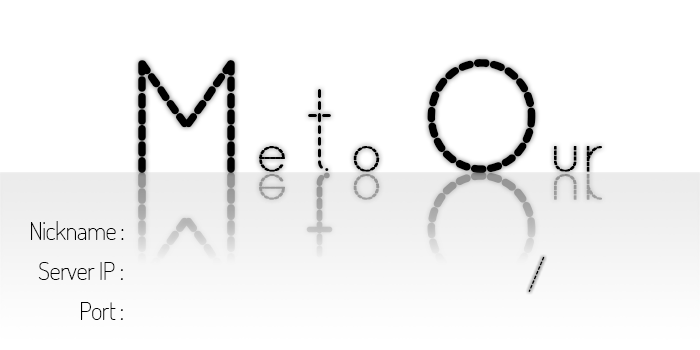
<style>
.page{position:relative;width:700px;height:350px;background:#ffffff}
.page>*{position:absolute;margin:0}
.t1{font:51.9px "QuicksandDash-Regular";letter-spacing:-0.025em;color:#000000;font-weight:bold}
.t2{font:155.6px "QuicksandDash-Regular";letter-spacing:-0.025em;color:#000000;font-weight:bold}
.t3{font:116.7px "QuicksandDash-Regular";letter-spacing:-0.025em;color:#000000;font-weight:bold}
.t4{font:51.9px "QuicksandDash-Regular";letter-spacing:-0.025em;font-weight:bold}
.t5{font:155.6px "QuicksandDash-Regular";letter-spacing:-0.025em;font-weight:bold}
.t6{font:116.7px "QuicksandDash-Regular";letter-spacing:-0.025em;font-weight:bold}
.t7{font:25px "Dosis-ExtraLight";letter-spacing:-0.025em;color:#000000}
.t8{font:50px "QuicksandDash-Regular";letter-spacing:-0.025em;color:#000000}
</style>
<div class="page">
<p class="t1" style="left:138px;top:59px;width:464px;height:114px"><span class="t2">M</span>e <span class="t3">t</span>o <span class="t2">O</span>ur</p>
<p class="t4" style="left:138px;top:172px;width:464px;height:114px"><span class="t5">M</span>e <span class="t6">t</span>o <span class="t5">O</span>ur</p>
<p class="t7" style="left:31px;top:221px;width:93px;height:19px">Nickname :</p>
<p class="t8" style="left:528px;top:256px;width:17px;height:36px">/</p>
<p class="t7" style="left:38px;top:262px;width:85px;height:18px">Server IP :</p>
<p class="t7" style="left:81px;top:302px;width:42px;height:18px">Port :</p>
</div>
